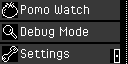
<style>
.page{position:relative;width:128px;height:64px;background:#383838}
.page>*{position:absolute;margin:0}
.t1{font:16px "PixelOperator";color:#ffffff}
.t2{font:16px "PixelOperator";color:#fff9f9}
</style>
<div class="page">
<p class="t1" style="left:21px;top:5px;width:68px;height:9px"><span class="t2">P</span>omo Watch</p>
<p class="t1" style="left:21px;top:27px;width:67px;height:11px">Debug Mode</p>
<p class="t1" style="left:21px;top:49px;width:48px;height:11px">Settings</p>
</div>
